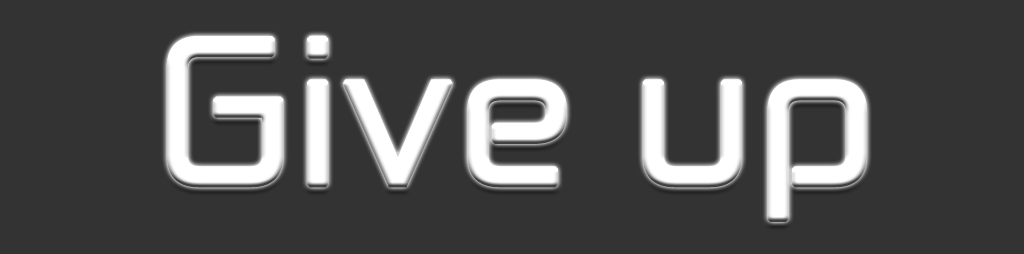
<style>
.page{position:relative;width:1024px;height:254px;background:#333333}
.page>*{position:absolute;margin:0}
.t1{font:200px "ZektonRg-Regular";color:#ffffff;font-weight:bold}
</style>
<div class="page">
<p class="t1" style="left:166px;top:35px;width:701px;height:187px">Give up</p>
</div>
